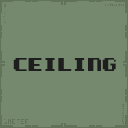
<style>
.page{position:relative;width:128px;height:128px;background:#75896e}
.page>*{position:absolute;margin:0}
.t1{font:19px "KemcoPixelBold";color:#1e1e1e}
</style>
<div class="page">
<p class="t1" style="left:13px;top:58px;width:103px;height:13px">Ceiling</p>
</div>
